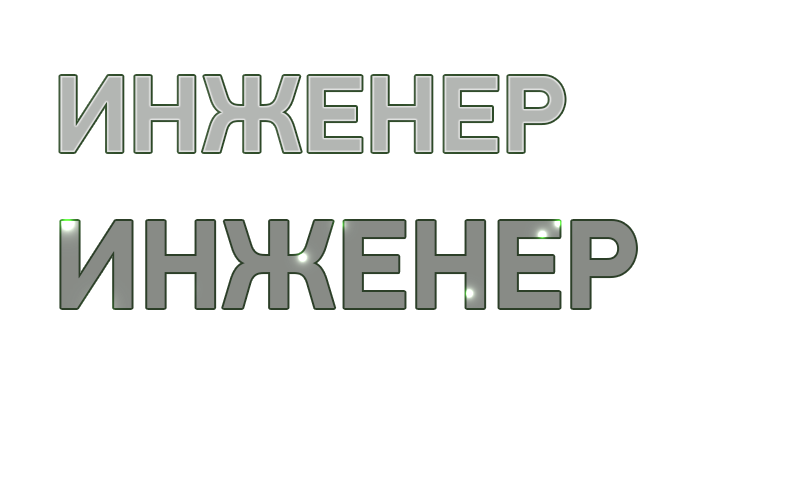
<style>
.page{position:relative;width:800px;height:500px;background:#ffffff}
.page>*{position:absolute;margin:0}
.t1{font:126.5px "PFDinDisplayPro-Bold";color:#888b86}
</style>
<div class="page">
<p class="t1" style="left:61px;top:221px;width:575px;height:87px">ИНЖЕНЕР</p>
</div>
